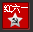
<style>
.page{position:relative;width:33px;height:32px;background:#c50000}
.page>*{position:absolute;margin:0}
.t1{font:10.4px "SimSun";letter-spacing:-0.25em;color:#ffffff}
</style>
<div class="page">
<p class="t1" style="left:4px;top:4px;width:24px;height:9px">红六一</p>
</div>
